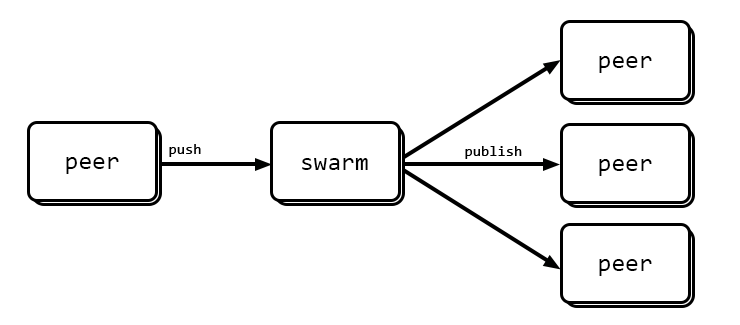
<style>
.page{position:relative;width:740px;height:325px;background:#ffffff}
.page>*{position:absolute;margin:0}
.t1{font:25px "Consolas";color:#000000}
.t2{font:15px "Consolas";color:#000000}
</style>
<div class="page">
<p class="t1" style="left:599px;top:56px;width:53px;height:17px">peer</p>
<p class="t2" style="left:169px;top:144px;width:32px;height:13px">push</p>
<p class="t2" style="left:465px;top:146px;width:57px;height:13px">publish</p>
<p class="t1" style="left:66px;top:157px;width:53px;height:17px">peer</p>
<p class="t1" style="left:302px;top:158px;width:66px;height:12px">swarm</p>
<p class="t1" style="left:599px;top:159px;width:53px;height:17px">peer</p>
<p class="t1" style="left:599px;top:259px;width:53px;height:17px">peer</p>
</div>
